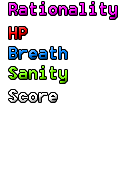
<style>
.page{position:relative;width:129px;height:192px;background:#ffffff}
.page>*{position:absolute;margin:0}
.t1{font:18px "8514oem"}
</style>
<div class="page">
<p class="t1" style="left:9px;top:2px;width:108px;height:17px">Rationality</p>
<p class="t1" style="left:9px;top:27px;width:18px;height:12px">HP</p>
<p class="t1" style="left:9px;top:47px;width:58px;height:12px">Breath</p>
<p class="t1" style="left:9px;top:66px;width:58px;height:17px">Sanity</p>
<p class="t1" style="left:9px;top:90px;width:48px;height:12px">Score</p>
</div>
